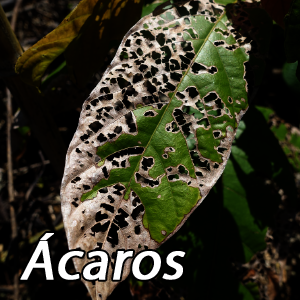
<style>
.page{position:relative;width:300px;height:300px}
.page>*{position:absolute;margin:0}
.t1{font:55.6px "MyriadPro-Regular";color:#ffffff;font-weight:bold;font-style:italic}
</style>
<div class="page">
<p class="t1" style="left:20px;top:233px;width:166px;height:47px">Ácaros</p>
</div>
